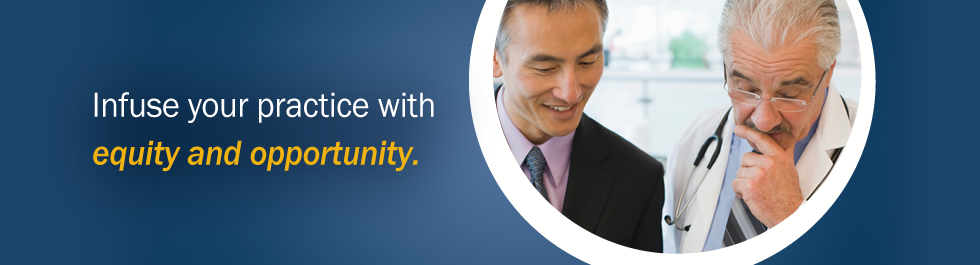
<style>
.page{position:relative;width:980px;height:265px}
.page>*{position:absolute;margin:0}
.t1{font:36px/48px "FranklinGothic-Book";letter-spacing:-0.01em;color:#ffffff;scale:0.95 1}
.t2{font:36px/48px "AGaramondPro-SemiboldItalic";letter-spacing:-0.01em;color:#ffffff;scale:0.95 1}
.t3{font:36px/48px "FranklinGothic-MediumItalic";letter-spacing:-0.01em;color:#f0b310;scale:0.95 1}
</style>
<div class="page">
<p class="t1" style="left:93px;top:92px;width:341px;height:80px">Infuse your practice with<span class="t2"> <br></span><span class="t3">equity and opportunity.</span></p>
</div>
